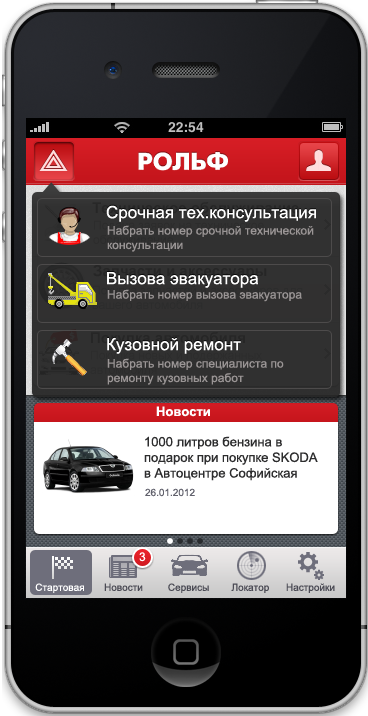
<style>
.page{position:relative;width:368px;height:716px}
.page>*{position:absolute;margin:0}
.t1{font:17px/33px "ArialMT";color:#ffffff}
.t2{font:12px "ArialMT";color:#9a9595}
.t3{font:13px "Arial-BoldMT";color:#ffffff}
.t4{font:13px "ArialMT";color:#2d2d2e}
.t5{font:10px "ArialMT";color:#61616c}
.t6{font:12px "ArialMT";color:#ffffff}
.t7{font:10px "ArialMT";color:#4a4a54}
.t8{font:10px "ArialMT";color:#ffffff}
</style>
<div class="page">
<p class="t1" style="left:106px;top:205px;width:210px;height:149px">Срочная тех.консультация<br><br>Вызова эвакуатора<br><br>Кузовной ремонт</p>
<p class="t2" style="left:107px;top:225px;width:207px;height:27px">Набрать номер срочной технической консультации</p>
<p class="t2" style="left:107px;top:289px;width:195px;height:13px">Набрать номер вызова эвакуатора</p>
<p class="t2" style="left:107px;top:358px;width:177px;height:27px">Набрать номер специалиста по ремонту кузовных работ</p>
<p class="t3" style="left:156px;top:406px;width:54px;height:11px">Новости</p>
<p class="t4" style="left:144px;top:436px;width:174px;height:45px">1000 литров бензина в подарок при покупке SKODA <br>в Автоцентре Софийская</p>
<p class="t5" style="left:145px;top:488px;width:50px;height:9px">26.01.2012</p>
<p class="t6" style="left:139px;top:552px;width:7px;height:10px">3</p>
<p class="t7" style="left:35px;top:583px;width:300px;height:10px"><span class="t8">Стартовая       </span>Новости         Сервисы        Локатор      Настройки</p>
</div>
